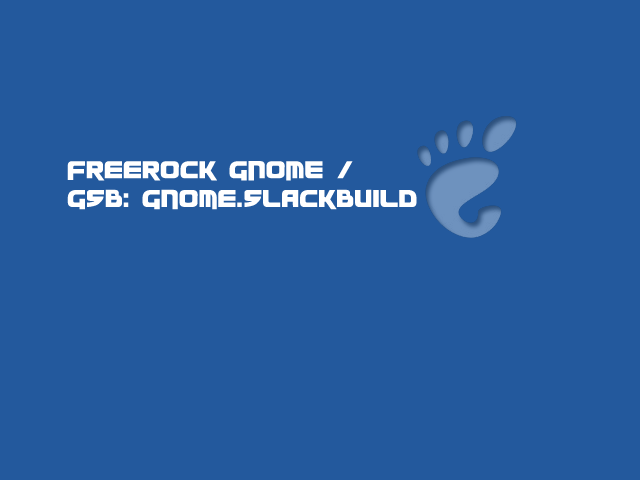
<style>
.page{position:relative;width:640px;height:480px;background:#23599d}
.page>*{position:absolute;margin:0}
.t1{font:24px "Moltors";color:#ffffff}
</style>
<div class="page">
<p class="t1" style="left:67px;top:161px;width:350px;height:49px">Freerock GNOME /<br>GSB: Gnome.SlackBuild</p>
</div>
